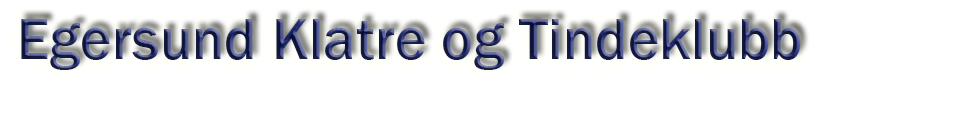
<style>
.page{position:relative;width:960px;height:120px;background:#ffffff}
.page>*{position:absolute;margin:0}
.t1{font:60px "FranklinGothic-Medium"}
</style>
<div class="page">
<p class="t1" style="left:21px;top:19px;width:780px;height:51px">Egersund Klatre og Tindeklubb</p>
</div>
